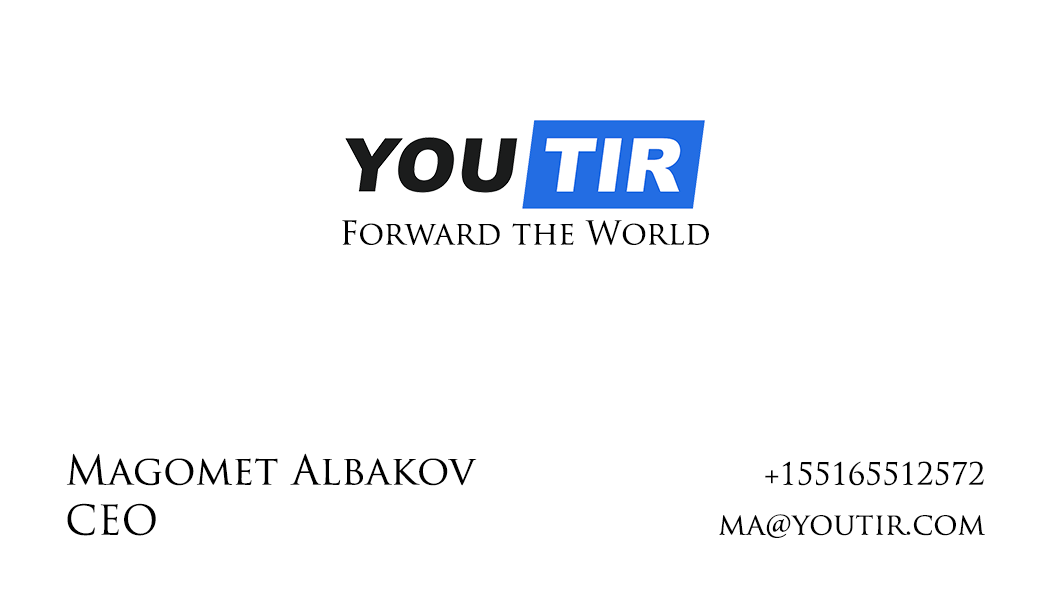
<style>
.page{position:relative;width:1050px;height:600px;background:#ffffff}
.page>*{position:absolute;margin:0}
.t1{font:32px "TrajanPro-Regular";color:#000000}
.t2{font:40px/50px "TrajanPro-Regular";color:#000000}
.t3{font:30px/50px "TrajanPro-Regular";color:#000000}
</style>
<div class="page">
<p class="t1" style="left:342px;top:220px;width:367px;height:26px">Forward the World</p>
<p class="t2" style="left:66px;top:453px;width:411px;height:83px;text-align:justify">Magomet Albakov<br>CEO</p>
<p class="t3" style="left:719px;top:461px;width:266px;height:77px;text-align:justify">+155165512572<br>ma@youtir.com</p>
</div>
